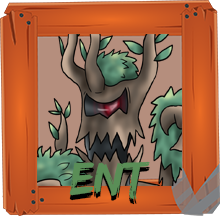
<style>
.page{position:relative;width:220px;height:216px}
.page>*{position:absolute;margin:0}
.t1{font:48px "EdoSZ";color:#5a8e57}
.t2{font:48px "EdoSZ"}
</style>
<div class="page">
<p class="t1" style="left:69px;top:161px;width:81px;height:39px">ENT</p>
<p class="t2" style="left:69px;top:166px;width:81px;height:39px">ent</p>
</div>
